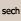
<style>
.page{position:relative;width:21px;height:21px;background:#d9cdc1}
.page>*{position:absolute;margin:0}
.t1{font:9px "Tahoma";color:#000000}
</style>
<div class="page">
<p class="t1" style="left:2px;top:7px;width:18px;height:8px">sech</p>
</div>
